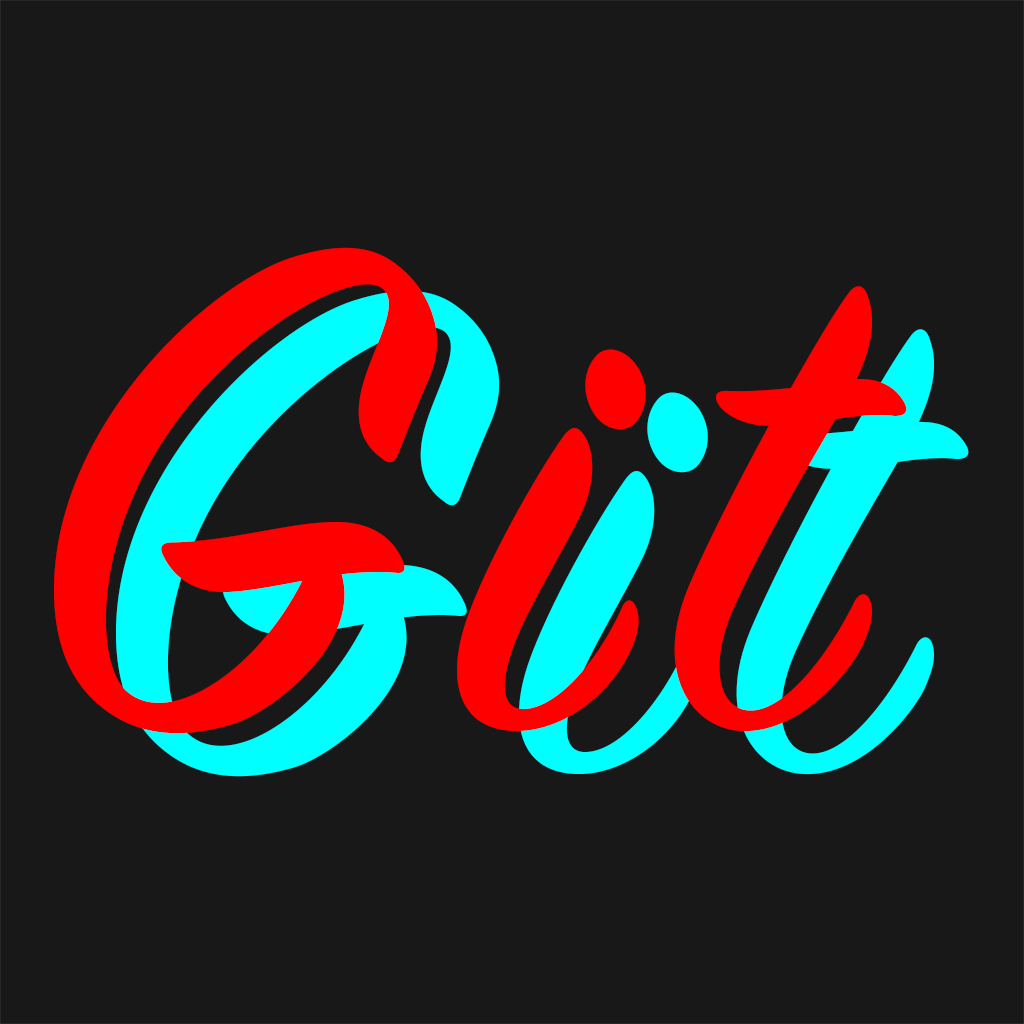
<style>
.page{position:relative;width:1024px;height:1024px;background:#181818}
.page>*{position:absolute;margin:0}
.t1{font:757.3px "SignPainter-HouseScript";letter-spacing:0.075em;color:#ff0000}
.t2{font:757.3px "SignPainter-HouseScript";letter-spacing:0.075em;color:#00ffff}
</style>
<div class="page">
<p class="t1" style="left:54px;top:247px;width:853px;height:487px">Git</p>
<p class="t2" style="left:116px;top:290px;width:853px;height:487px">Git</p>
</div>
